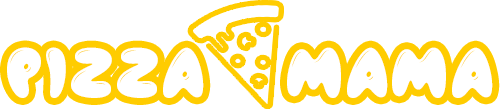
<style>
.page{position:relative;width:500px;height:109px;background:#ffffff}
.page>*{position:absolute;margin:0}
.t1{font:72px "Airfool";letter-spacing:0.025em;color:#ffffff;text-transform:uppercase}
</style>
<div class="page">
<p class="t1" style="left:7px;top:47px;width:486px;height:51px">pizza     mama</p>
</div>
